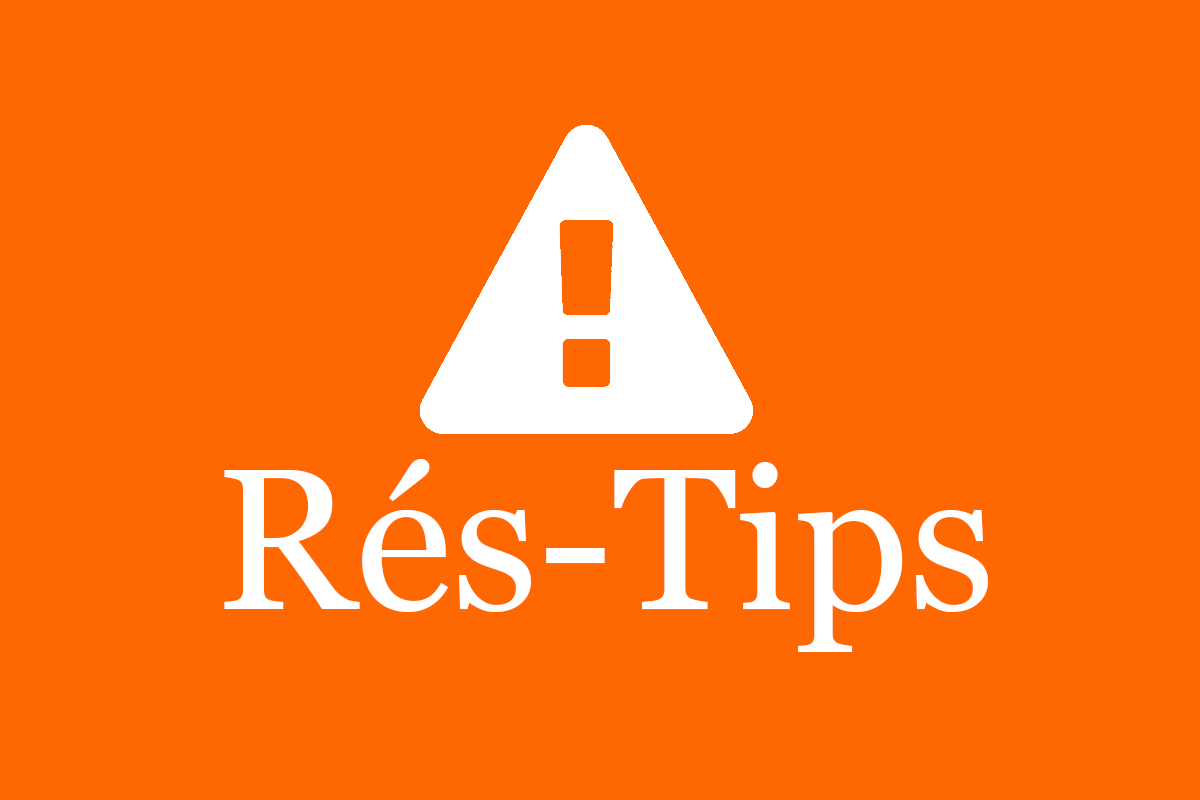
<style>
.page{position:relative;width:1200px;height:800px;background:#ff6700}
.page>*{position:absolute;margin:0}
.t1{font:200px "Georgia";color:#ffffff}
</style>
<div class="page">
<p class="t1" style="left:224px;top:459px;width:764px;height:193px">Rés-Tips</p>
</div>
